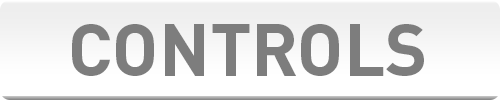
<style>
.page{position:relative;width:500px;height:100px;background:#ffffff}
.page>*{position:absolute;margin:0}
.t1{font:72px "DINPro-Bold";color:#7d7d7d}
</style>
<div class="page">
<p class="t1" style="left:72px;top:24px;width:352px;height:52px">CONTROLS</p>
</div>
